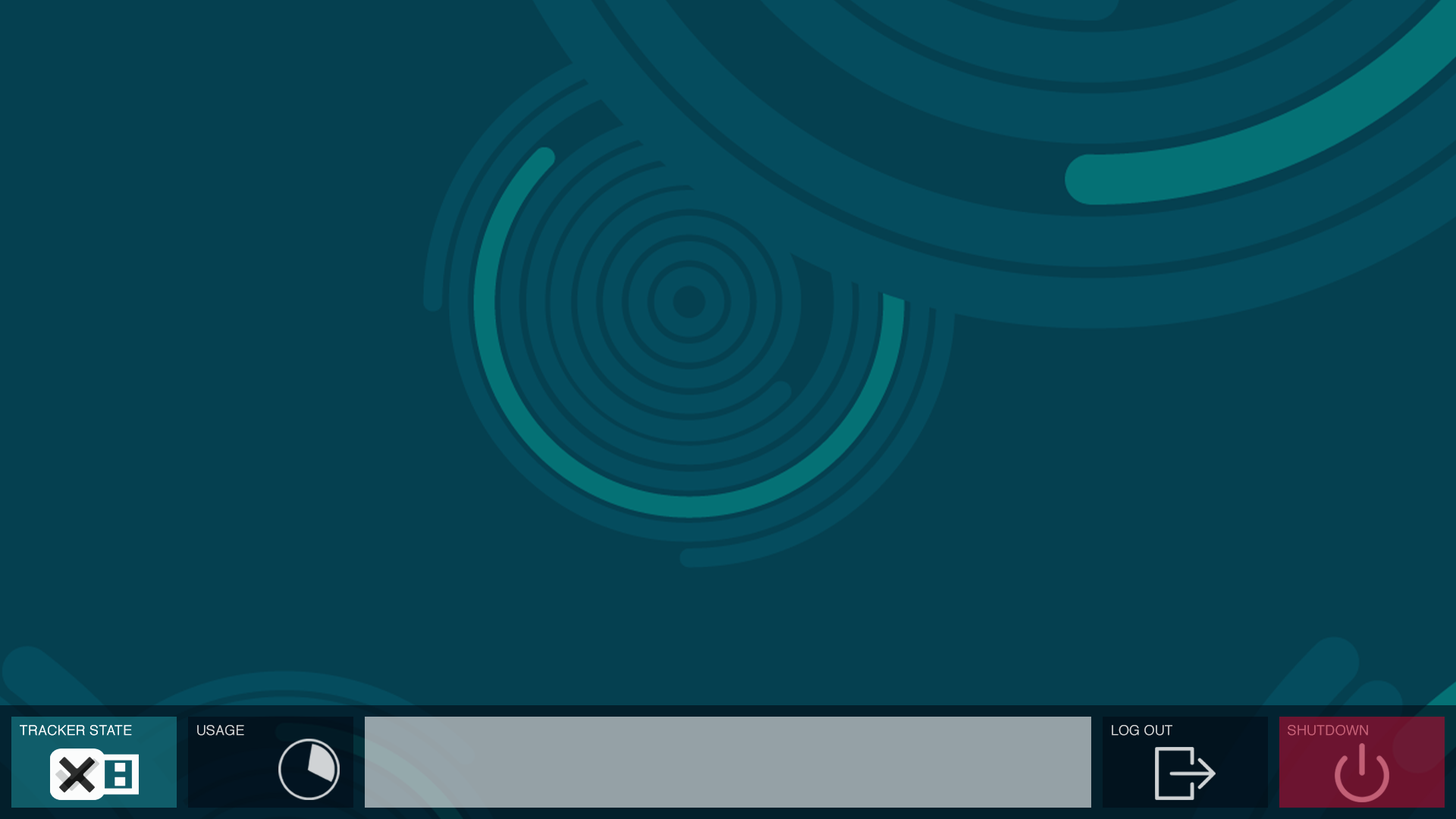
<style>
.page{position:relative;width:1456px;height:819px;background:#054050}
.page>*{position:absolute;margin:0}
.t1{font:13.6px "Helvetica";letter-spacing:0.01em;color:#d8d9db}
.t2{font:13.6px "Helvetica";letter-spacing:0.01em;color:#c56278}
</style>
<div class="page">
<p class="t1" style="left:197px;top:725px;width:47px;height:11px">USAGE</p>
<p class="t1" style="left:1112px;top:725px;width:60px;height:11px">LOG OUT</p>
<p class="t2" style="left:1288px;top:725px;width:80px;height:11px">SHUTDOWN</p>
</div>
